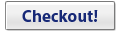
<style>
.page{position:relative;width:120px;height:32px;background:#f1f1f1}
.page>*{position:absolute;margin:0}
.t1{font:17px "MyriadPro-Bold";color:#172977}
</style>
<div class="page">
<p class="t1" style="left:22px;top:10px;width:76px;height:12px">Checkout!</p>
</div>
